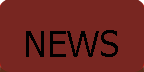
<style>
.page{position:relative;width:144px;height:72px;background:#782621}
.page>*{position:absolute;margin:0}
.t1{font:36px "Tahoma";color:#000000}
</style>
<div class="page">
<p class="t1" style="left:26px;top:30px;width:92px;height:27px">NEWS</p>
</div>
